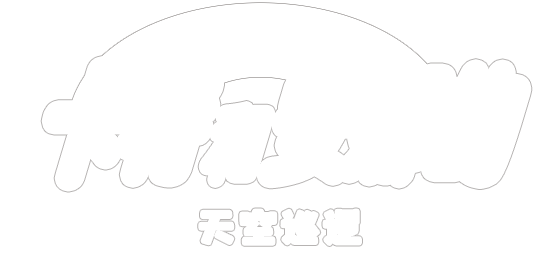
<style>
.page{position:relative;width:560px;height:256px;background:#ffffff}
.page>*{position:absolute;margin:0}
.t1{font:40px "yixinmengyati";letter-spacing:0.05em;color:#ffffff}
</style>
<div class="page">
<p class="t1" style="left:200px;top:210px;width:160px;height:34px">天空巡逻</p>
</div>
